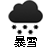
<style>
.page{position:relative;width:50px;height:48px;background:#ffffff}
.page>*{position:absolute;margin:0}
.t1{font:12px "OPPOSans-R";color:#000000}
</style>
<div class="page">
<p class="t1" style="left:14px;top:36px;width:23px;height:11px">暴雪</p>
</div>
